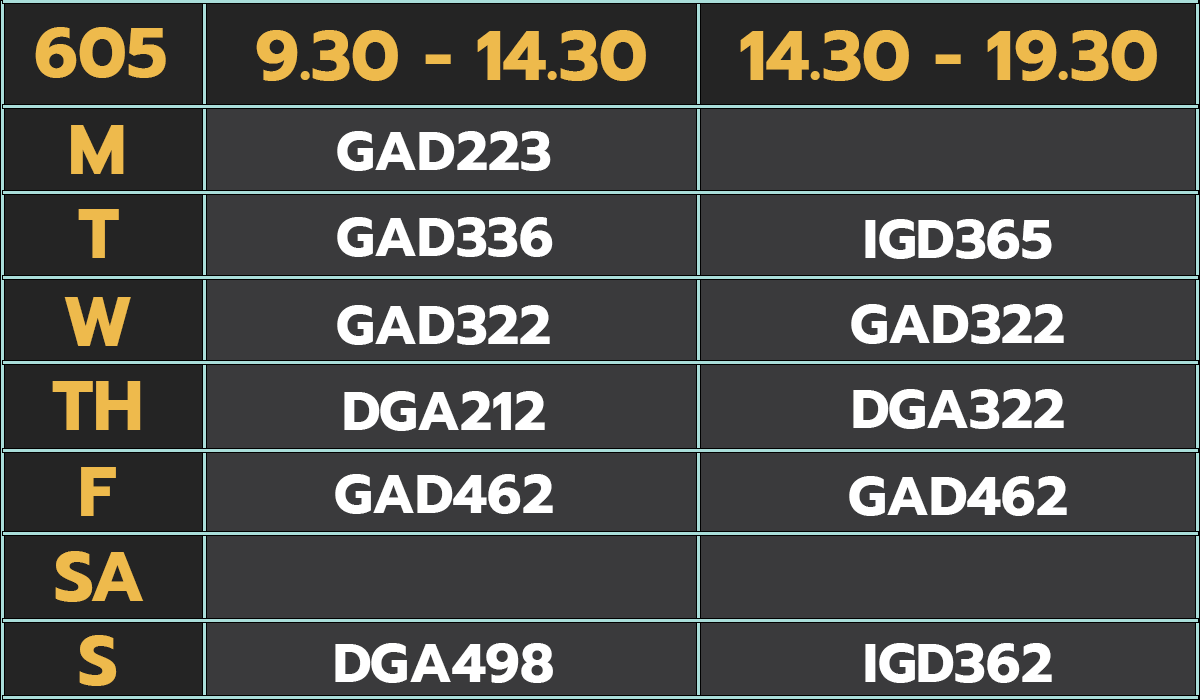
<style>
.page{position:relative;width:1200px;height:700px;background:#3a3a3c}
.page>*{position:absolute;margin:0}
.t1{font:70px "Prompt-Bold";color:#eeba4c}
.t2{font:55px "Prompt-Bold";color:#ffffff}
</style>
<div class="page">
<p class="t1" style="left:35px;top:27px;width:131px;height:51px">605</p>
<p class="t1" style="left:256px;top:30px;width:390px;height:51px">9.30 - 14.30</p>
<p class="t1" style="left:740px;top:30px;width:417px;height:51px">14.30 - 19.30</p>
<p class="t1" style="left:71px;top:125px;width:53px;height:49px">M</p>
<p class="t2" style="left:337px;top:131px;width:214px;height:40px">GAD223</p>
<p class="t1" style="left:78px;top:209px;width:41px;height:49px">T</p>
<p class="t2" style="left:337px;top:217px;width:216px;height:40px">GAD336</p>
<p class="t2" style="left:865px;top:219px;width:187px;height:40px">IGD365</p>
<p class="t1" style="left:64px;top:297px;width:67px;height:49px">W</p>
<p class="t2" style="left:337px;top:305px;width:213px;height:40px">GAD322</p>
<p class="t2" style="left:851px;top:304px;width:213px;height:40px">GAD322</p>
<p class="t1" style="left:52px;top:381px;width:89px;height:49px">TH</p>
<p class="t2" style="left:853px;top:389px;width:211px;height:40px">DGA322</p>
<p class="t2" style="left:344px;top:391px;width:201px;height:40px">DGA212</p>
<p class="t1" style="left:81px;top:467px;width:35px;height:49px">F</p>
<p class="t2" style="left:335px;top:474px;width:218px;height:40px">GAD462</p>
<p class="t2" style="left:849px;top:476px;width:218px;height:40px">GAD462</p>
<p class="t1" style="left:55px;top:551px;width:89px;height:51px">SA</p>
<p class="t1" style="left:79px;top:635px;width:38px;height:51px">S</p>
<p class="t2" style="left:335px;top:643px;width:218px;height:40px">DGA498</p>
<p class="t2" style="left:865px;top:643px;width:187px;height:40px">IGD362</p>
</div>
